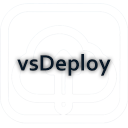
<style>
.page{position:relative;width:128px;height:128px;background:#ffffff}
.page>*{position:absolute;margin:0}
.t1{font:23.4px "Corbel-Bold";color:#091928}
</style>
<div class="page">
<p class="t1" style="left:17px;top:54px;width:94px;height:22px">vsDeploy</p>
</div>
